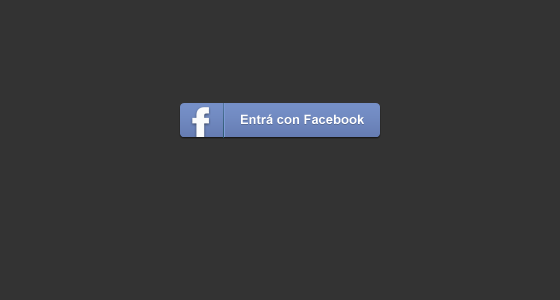
<style>
.page{position:relative;width:560px;height:300px;background:#333333}
.page>*{position:absolute;margin:0}
.t1{font:13px "Arial-BoldMT";color:#ffffff}
</style>
<div class="page">
<p class="t1" style="left:241px;top:114px;width:123px;height:10px">Entrá con Facebook</p>
</div>
